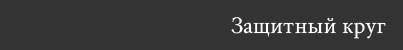
<style>
.page{position:relative;width:403px;height:50px;background:#333333}
.page>*{position:absolute;margin:0}
.t1{font:24px "CrimsonText-Regular";color:#ffffff}
</style>
<div class="page">
<p class="t1" style="left:231px;top:17px;width:155px;height:22px">Защитный круг</p>
</div>
